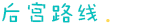
<style>
.page{position:relative;width:153px;height:26px;background:#ffffff}
.page>*{position:absolute;margin:0}
.t1{font:22px "BauhausITC";letter-spacing:0.1em;color:#02c1bf}
</style>
<div class="page">
<p class="t1" style="left:2px;top:2px;width:96px;height:21px">后宫路线</p>
</div>
